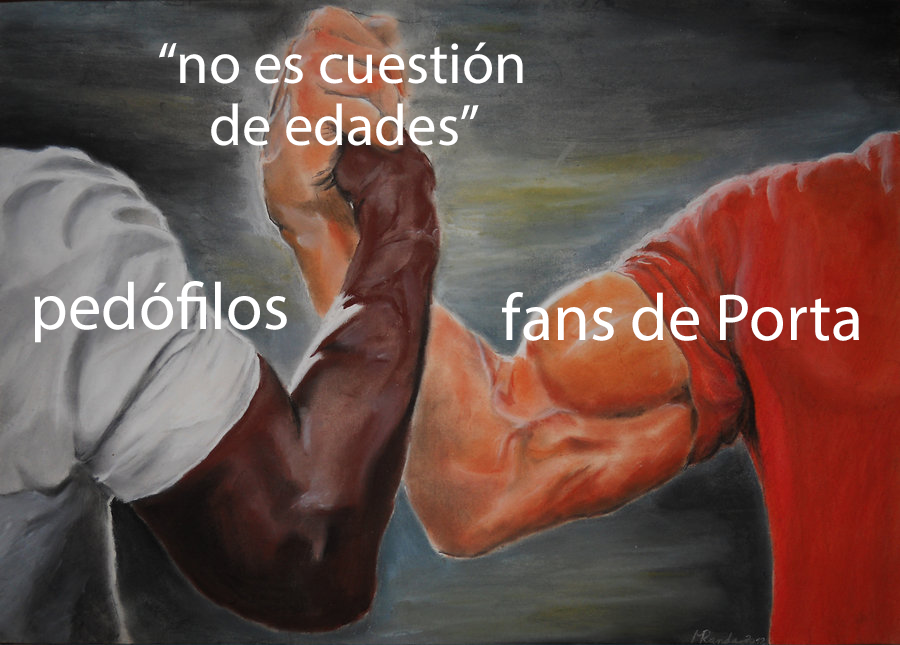
<style>
.page{position:relative;width:900px;height:645px}
.page>*{position:absolute;margin:0}
.t1{font:58.5px "MyriadPro-Regular";color:#ffffff}
.t2{font:66.7px "MyriadPro-Regular";color:#ffffff}
</style>
<div class="page">
<p class="t1" style="left:159px;top:42px;width:364px;height:104px;text-align:center">“no es cuestión<br>de edades”</p>
<p class="t2" style="left:34px;top:281px;width:253px;height:62px">pedófilos</p>
<p class="t2" style="left:502px;top:292px;width:357px;height:49px">fans de Porta</p>
</div>
